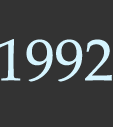
<style>
.page{position:relative;width:113px;height:127px;background:#333333}
.page>*{position:absolute;margin:0}
.t1{font:59.1px "PalatinoLinotype-Roman";letter-spacing:-0.027em;color:#d6f5ff;font-weight:bold}
</style>
<div class="page">
<p class="t1" style="left:0px;top:39px;width:112px;height:43px">1992</p>
</div>
